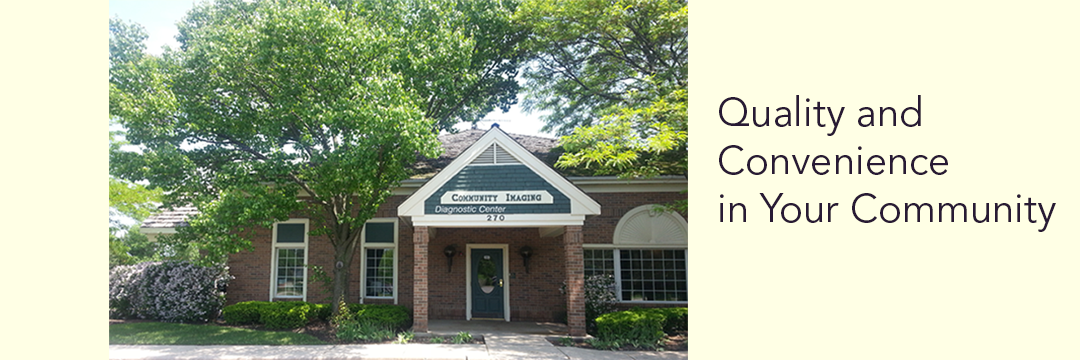
<style>
.page{position:relative;width:1080px;height:360px;background:#ffffe5}
.page>*{position:absolute;margin:0}
.t1{font:39.9px "AvenirLTStd-Book";color:#281a34}
</style>
<div class="page">
<p class="t1" style="left:719px;top:95px;width:337px;height:137px">Quality and <br>Convenience<br>in Your Community</p>
</div>
